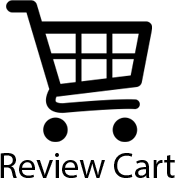
<style>
.page{position:relative;width:175px;height:178px;background:#ffffff}
.page>*{position:absolute;margin:0}
.t1{font:36px "MyriadPro-Regular";color:#000000}
</style>
<div class="page">
<p class="t1" style="left:0px;top:153px;width:175px;height:25px">Review Cart</p>
</div>
